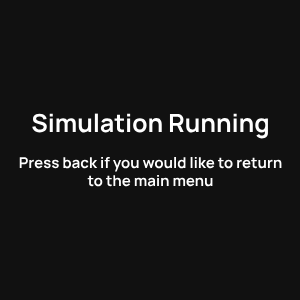
<style>
.page{position:relative;width:300px;height:300px;background:#111111}
.page>*{position:absolute;margin:0}
.t1{font:15px "Manrope-Bold";color:#ffffff}
.t2{font:25px "Manrope-Bold";color:#ffffff}
</style>
<div class="page">
<p class="t1" style="left:19px;top:113px;width:263px;height:74px;text-align:center"><span class="t2">Simulation Running<br><br></span>Press back if you would like to return <br>to the main menu</p>
</div>
